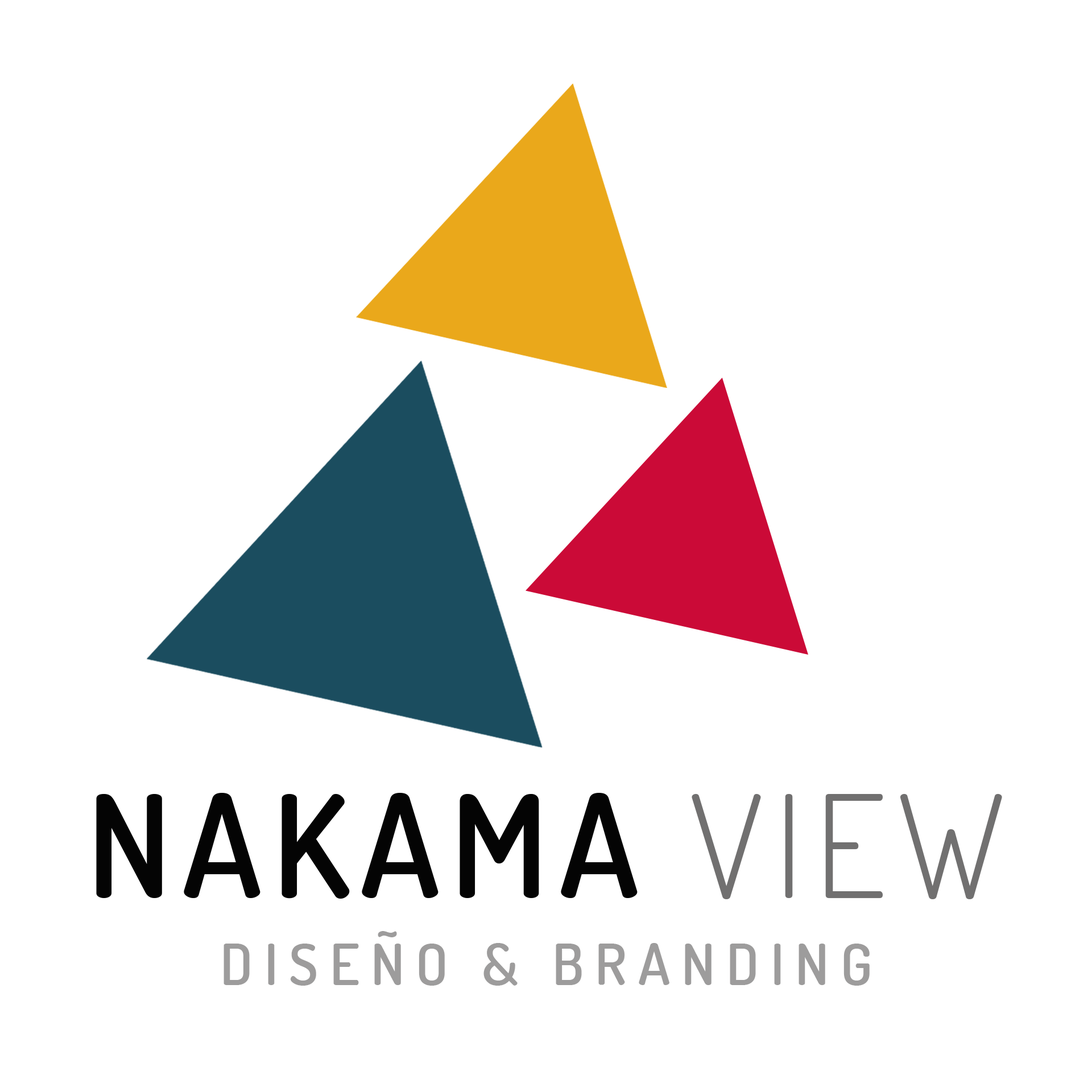
<style>
.page{position:relative;width:1092px;height:1092px;background:#ffffff}
.page>*{position:absolute;margin:0}
.t1{font:142.2px "Dosis-SemiBold";letter-spacing:0.075em;color:#040404}
.t2{font:142.2px "Dosis-Light";letter-spacing:0.075em;color:#717070}
.t3{font:56.9px "Dosis-SemiBold";letter-spacing:0.2em;color:#9d9c9c}
</style>
<div class="page">
<p class="t1" style="left:96px;top:793px;width:906px;height:106px">NAKAMA <span class="t2">VIEW</span></p>
<p class="t3" style="left:224px;top:931px;width:646px;height:55px">DISEÑO &amp; BRANDING</p>
</div>
